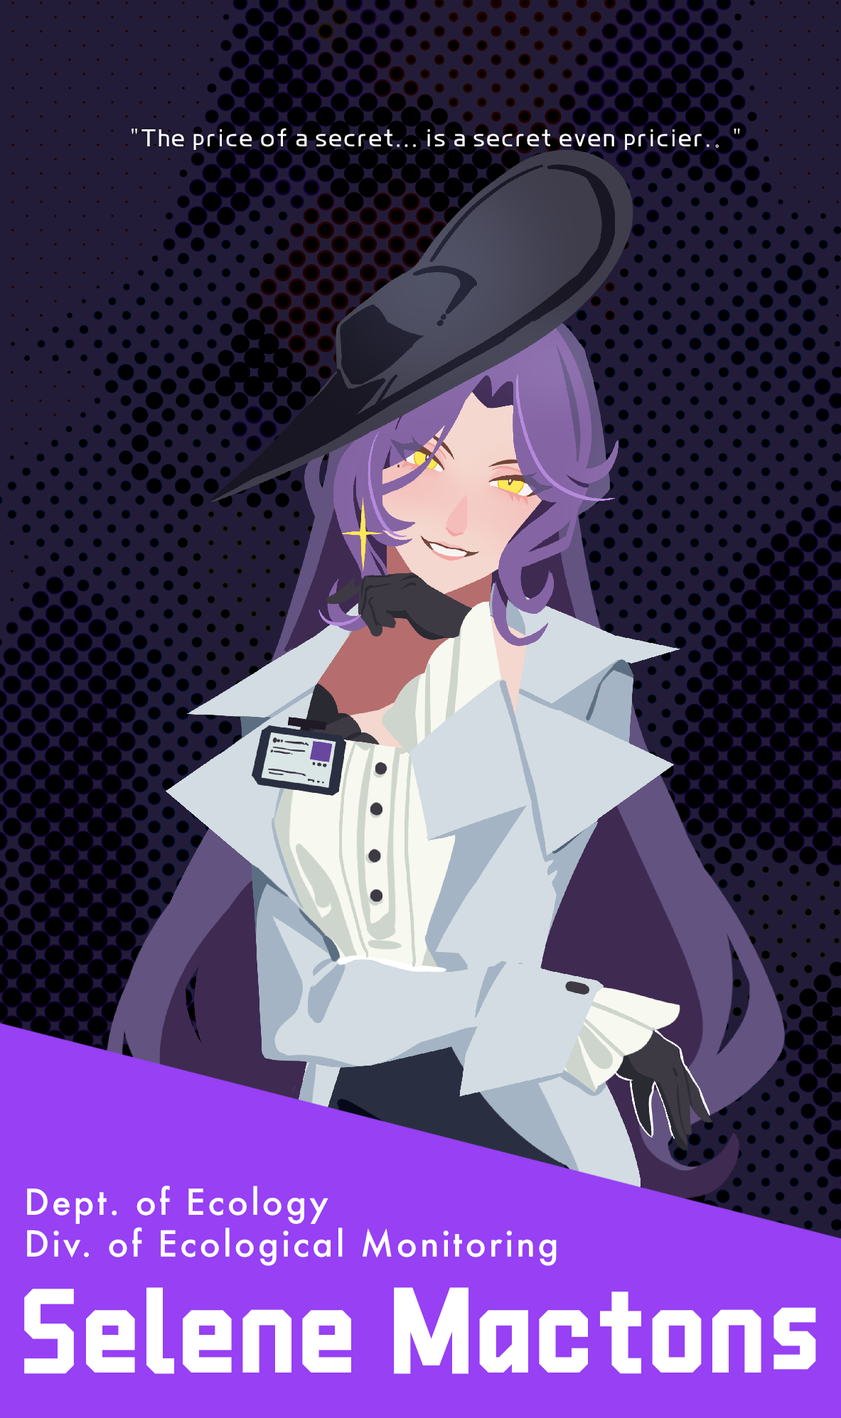
<style>
.page{position:relative;width:841px;height:1418px;background:#221c38}
.page>*{position:absolute;margin:0}
.t1{font:21.3px "CJgaodeguomiaohei";letter-spacing:0.075em;color:#ffffff}
.t2{font:34.8px "Futura-Medium";letter-spacing:0.075em;color:#ffffff}
.t3{font:98px "CKTKingKong";letter-spacing:0.075em;color:#ffffff}
</style>
<div class="page">
<p class="t1" style="left:131px;top:128px;width:609px;height:22px">"The price of a secret... is a secret even pricier.。"</p>
<p class="t2" style="left:27px;top:1186px;width:529px;height:80px">Dept. of Ecology<br>Div. of Ecological Monitoring</p>
<p class="t3" style="left:24px;top:1288px;width:792px;height:86px">Selene Mactons</p>
</div>
